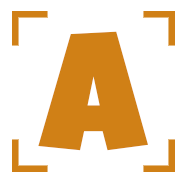
<style>
.page{position:relative;width:188px;height:185px;background:#ffffff}
.page>*{position:absolute;margin:0}
.t1{font:171.7px "LuckiestGuy-Regular";color:#d08016}
</style>
<div class="page">
<p class="t1" style="left:38px;top:31px;width:110px;height:120px">A</p>
</div>
